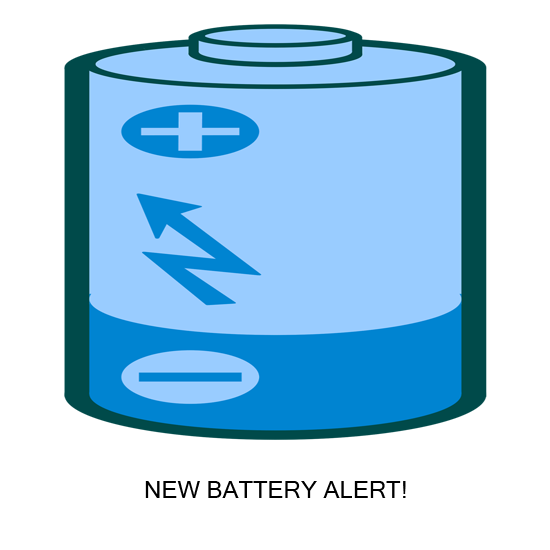
<style>
.page{position:relative;width:550px;height:550px;background:#ffffff}
.page>*{position:absolute;margin:0}
.t1{font:24px "MicrosoftSansSerif";color:#000000}
</style>
<div class="page">
<p class="t1" style="left:145px;top:481px;width:261px;height:17px">NEW BATTERY ALERT!</p>
</div>
